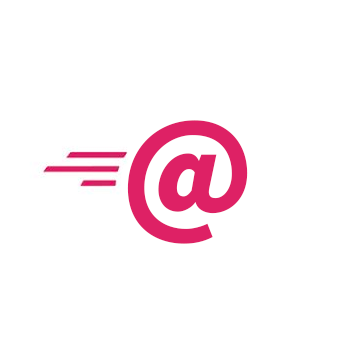
<style>
.page{position:relative;width:364px;height:364px;background:#ffffff}
.page>*{position:absolute;margin:0}
.t1{font:144px "SourceSansRoman-Black";color:#de2165}
</style>
<div class="page">
<p class="t1" style="left:127px;top:120px;width:121px;height:124px">@</p>
</div>
